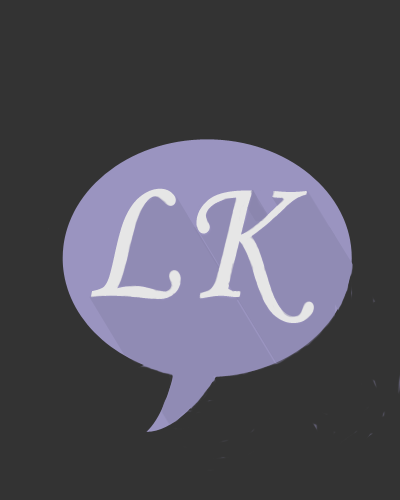
<style>
.page{position:relative;width:400px;height:500px;background:#333333}
.page>*{position:absolute;margin:0}
.t1{font:179.2px "MonotypeCorsiva";color:#e6e6e6;font-weight:bold;scale:0.91 1}
</style>
<div class="page">
<p class="t1" style="left:91px;top:188px;width:223px;height:135px">LK</p>
</div>
